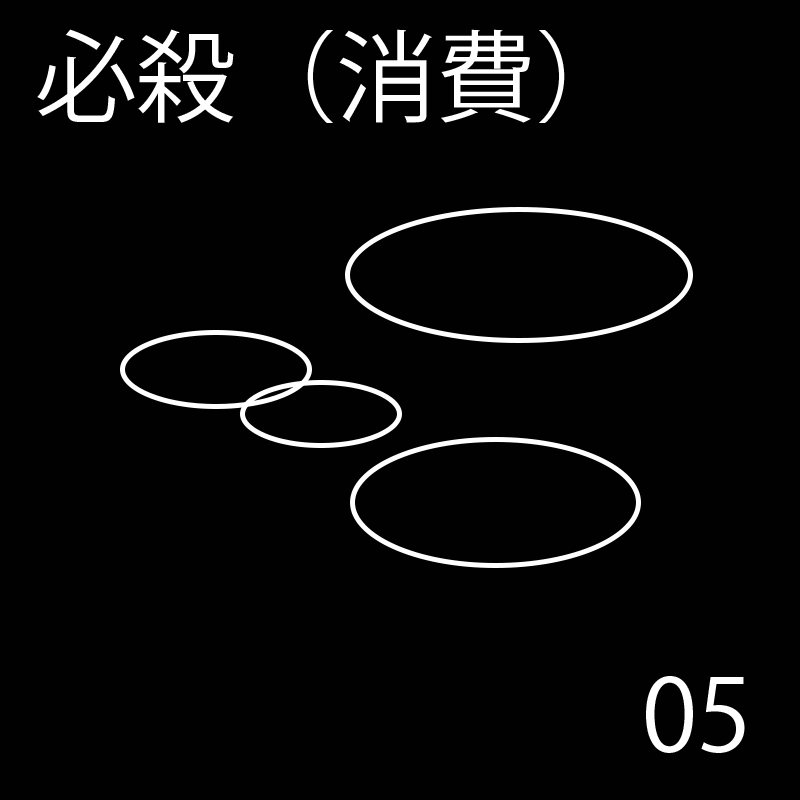
<style>
.page{position:relative;width:800px;height:800px;background:#010101}
.page>*{position:absolute;margin:0}
.t1{font:100px "KozGoPr6N-Regular";color:#ffffff}
</style>
<div class="page">
<p class="t1" style="left:37px;top:29px;width:528px;height:94px">必殺（消費）</p>
<p class="t1" style="left:37px;top:29px;width:528px;height:94px">必殺（消費）</p>
<p class="t1" style="left:37px;top:29px;width:528px;height:94px">必殺（消費）</p>
<p class="t1" style="left:37px;top:29px;width:528px;height:94px">必殺（消費）</p>
<p class="t1" style="left:37px;top:29px;width:528px;height:94px">必殺（消費）</p>
<p class="t1" style="left:37px;top:29px;width:528px;height:94px">必殺（消費）</p>
<p class="t1" style="left:646px;top:676px;width:102px;height:77px">00</p>
<p class="t1" style="left:646px;top:676px;width:85px;height:77px">01</p>
<p class="t1" style="left:646px;top:676px;width:101px;height:77px">02</p>
<p class="t1" style="left:646px;top:676px;width:99px;height:77px">03</p>
<p class="t1" style="left:646px;top:676px;width:105px;height:77px">04</p>
<p class="t1" style="left:646px;top:676px;width:99px;height:77px">05</p>
</div>
